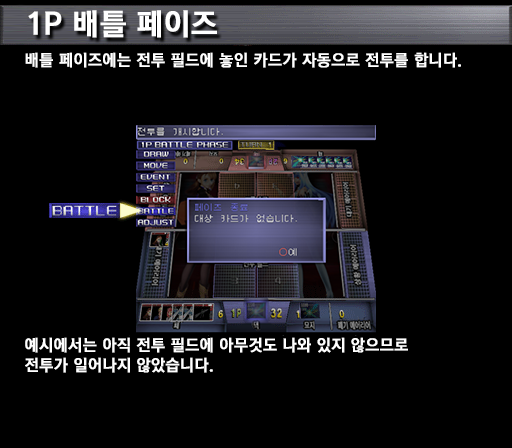
<style>
.page{position:relative;width:512px;height:448px;background:#000000}
.page>*{position:absolute;margin:0}
.t1{font:30px "KoreanGD15-R";color:#ffffff;font-weight:bold}
.t2{font:16px "KoreanGD15-R";color:#ffffff;font-weight:bold}
.t3{font:16px/20px "KoreanGD15-R";color:#ffffff;font-weight:bold}
</style>
<div class="page">
<p class="t1" style="left:28px;top:10px;width:189px;height:28px">1P 배틀 페이즈</p>
<p class="t2" style="left:25px;top:52px;width:436px;height:16px">배틀 페이즈에는 전투 필드에 놓인 카드가 자동으로 전투를 합니다.</p>
<p class="t3" style="left:25px;top:337px;width:383px;height:36px">예시에서는 아직 전투 필드에 아무것도 나와 있지 않으므로<br>전투가 일어나지 않았습니다.</p>
</div>
